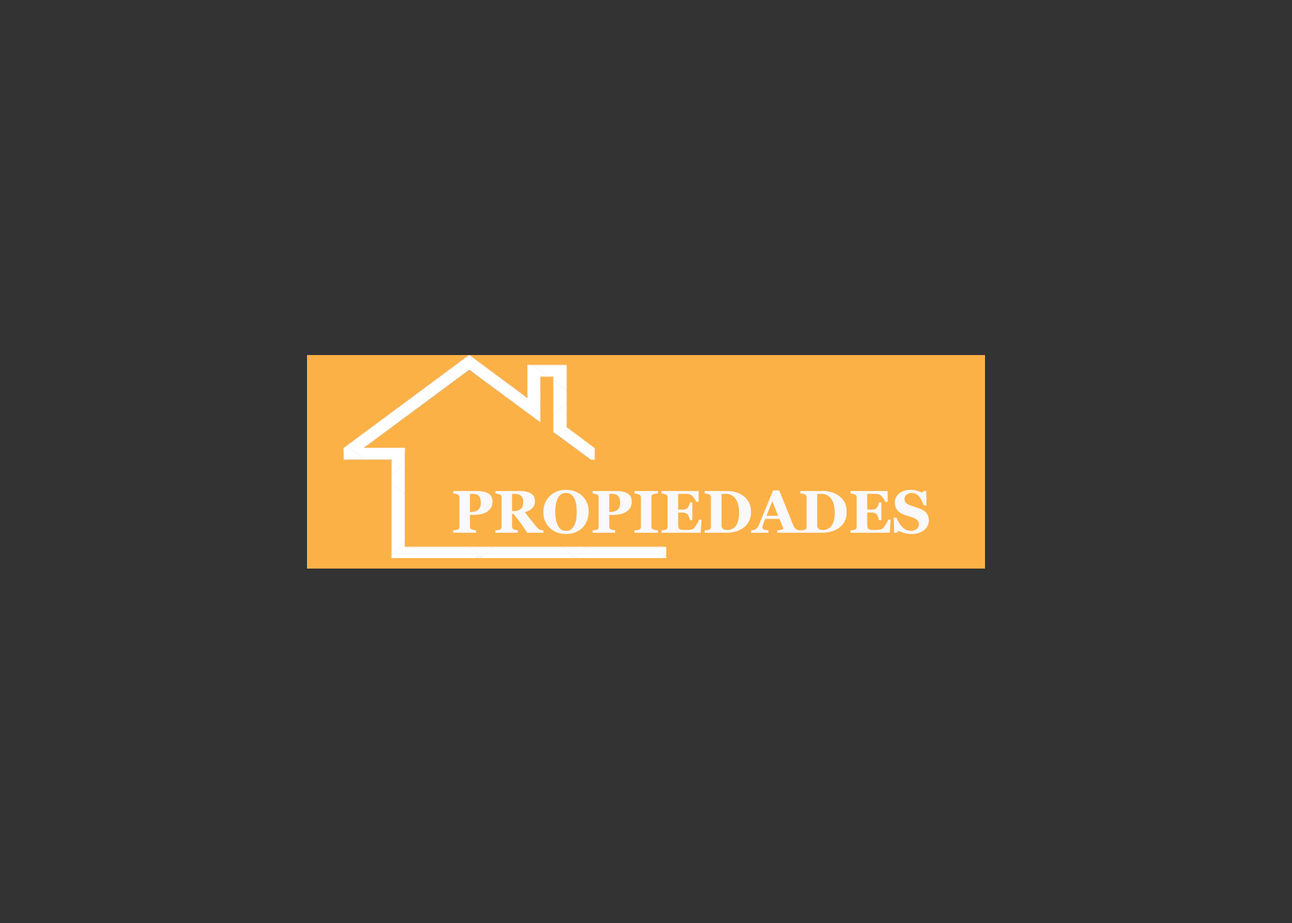
<style>
.page{position:relative;width:1292px;height:923px;background:#333333}
.page>*{position:absolute;margin:0}
.t1{font:60.1px "Georgia-Bold";color:#f9f8fa}
</style>
<div class="page">
<p class="t1" style="left:453px;top:490px;width:476px;height:44px">PROPIEDADES</p>
</div>
